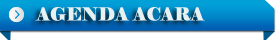
<style>
.page{position:relative;width:280px;height:40px}
.page>*{position:absolute;margin:0}
.t1{font:18px "Elephant-Regular";color:#e8f0f1}
</style>
<div class="page">
<p class="t1" style="left:35px;top:7px;width:170px;height:14px">AGENDA ACARA</p>
</div>
